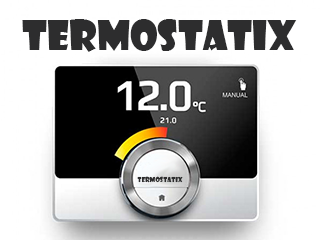
<style>
.page{position:relative;width:320px;height:240px;background:#ffffff}
.page>*{position:absolute;margin:0}
.t1{font:40px "ShowcardGothic-Reg";color:#2d2d2e}
.t2{font:6.6px "ShowcardGothic-Reg";color:#2d2d2e}
</style>
<div class="page">
<p class="t1" style="left:22px;top:19px;width:275px;height:33px">Termostatix</p>
<p class="t2" style="left:137px;top:176px;width:46px;height:7px">Termostatix</p>
</div>
